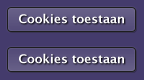
<style>
.page{position:relative;width:144px;height:80px;background:#443b6c}
.page>*{position:absolute;margin:0}
.t1{font:12px "LucidaGrande-Bold";color:#ffffff}
</style>
<div class="page">
<p class="t1" style="left:19px;top:13px;width:105px;height:11px">Cookies toestaan</p>
<p class="t1" style="left:19px;top:53px;width:105px;height:11px">Cookies toestaan</p>
</div>
